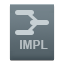
<style>
.page{position:relative;width:64px;height:64px;background:#ffffff}
.page>*{position:absolute;margin:0}
.t1{font:12px "Arial-BoldMT";color:#b6bec2}
</style>
<div class="page">
<p class="t1" style="left:20px;top:40px;width:28px;height:9px">IMPL</p>
</div>
